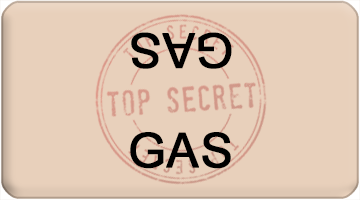
<style>
.page{position:relative;width:360px;height:200px;background:#e8d0bb}
.page>*{position:absolute;margin:0}
.t1{font:48px "ArialMT";color:#000000;font-weight:bold}
</style>
<div class="page">
<p class="t1" style="left:131px;top:32px;width:101px;height:37px;rotate:180deg">GAS</p>
<p class="t1" style="left:130px;top:132px;width:101px;height:37px">GAS</p>
</div>
